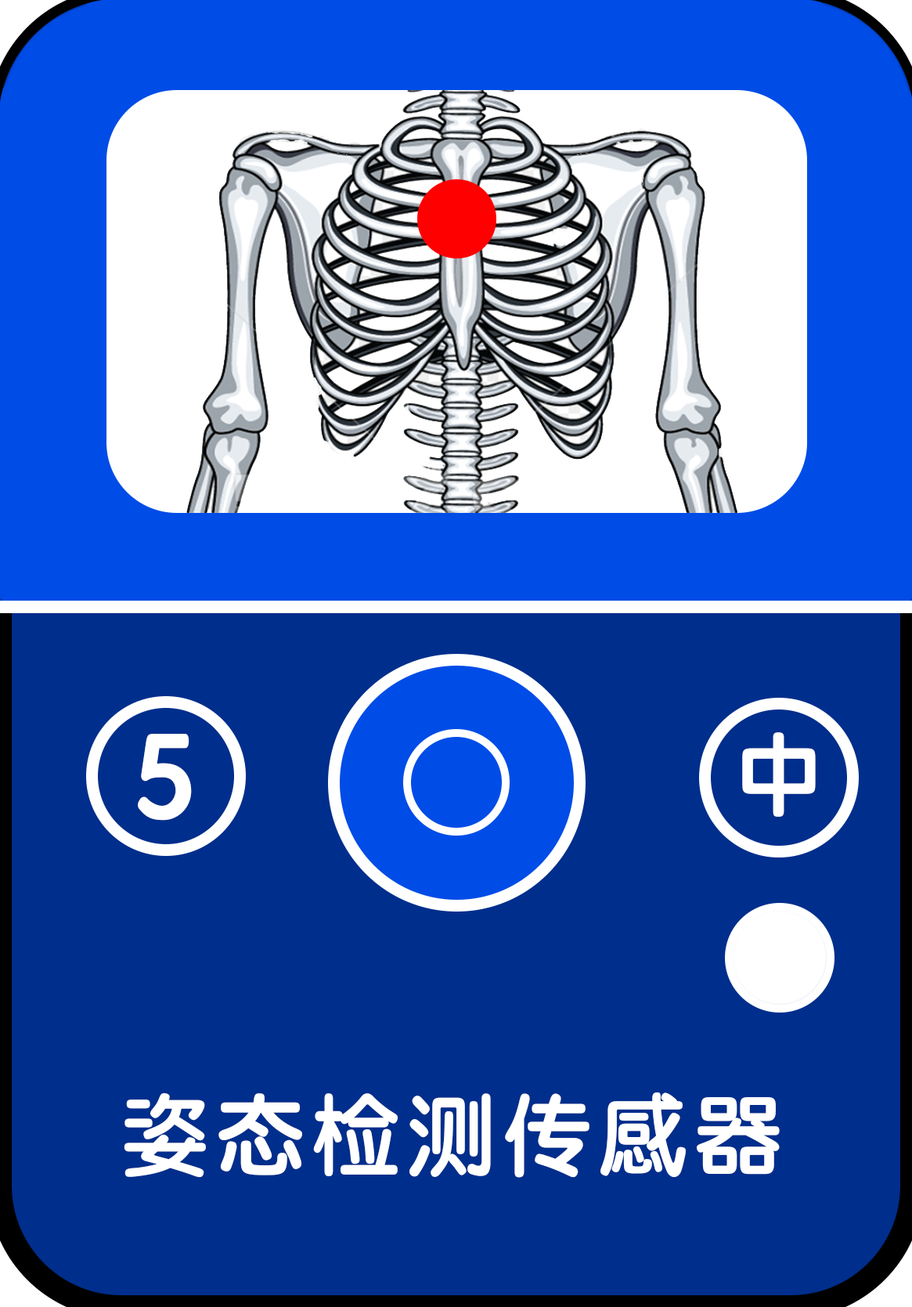
<style>
.page{position:relative;width:912px;height:1307px;background:#002e8c}
.page>*{position:absolute;margin:0}
.t1{font:121.8px "STYuanti-TC-Bold";letter-spacing:0.1em;color:#ffffff}
.t2{font:87px "STYuanti-TC-Bold";letter-spacing:0.1em;color:#ffffff}
</style>
<div class="page">
<p class="t1" style="left:138px;top:734px;width:54px;height:87px">5</p>
<p class="t2" style="left:742px;top:732px;width:74px;height:85px">中</p>
<p class="t2" style="left:124px;top:1092px;width:656px;height:86px">姿态检测传感器</p>
</div>
